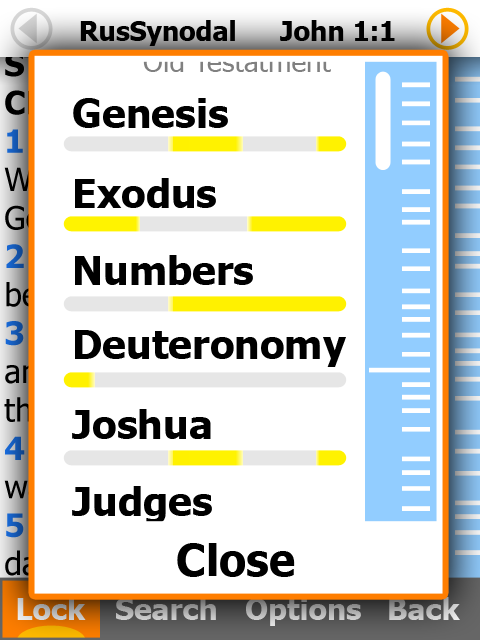
<style>
.page{position:relative;width:480px;height:640px;background:#ffffff}
.page>*{position:absolute;margin:0}
.t1{font:26.8px "Tahoma-Bold";color:#000000}
.t2{font:28px "Tahoma"}
.t3{font:40px "Tahoma-Bold";color:#000000}
.t4{font:44px "Tahoma-Bold";color:#000000}
.t5{font:30px "Tahoma-Bold"}
</style>
<div class="page">
<p class="t1" style="left:80px;top:20px;width:155px;height:26px">RusSynodal</p>
<p class="t1" style="left:280px;top:20px;width:115px;height:21px">John 1:1</p>
<p class="t2" style="left:143px;top:51px;width:188px;height:21px">Old Testatment</p>
<p class="t3" style="left:73px;top:98px;width:155px;height:30px">Genesis</p>
<p class="t3" style="left:75px;top:178px;width:141px;height:30px">Exodus</p>
<p class="t3" style="left:75px;top:255px;width:178px;height:30px">Numbers</p>
<p class="t3" style="left:75px;top:330px;width:271px;height:37px">Deuteronomy</p>
<p class="t3" style="left:72px;top:409px;width:139px;height:30px">Joshua</p>
<p class="t3" style="left:72px;top:486px;width:140px;height:38px">Judges</p>
<p class="t4" style="left:177px;top:543px;width:118px;height:34px">Close</p>
<p class="t5" style="left:17px;top:597px;width:69px;height:23px">Lock</p>
<p class="t5" style="left:116px;top:597px;width:100px;height:23px">Search</p>
<p class="t5" style="left:246px;top:598px;width:115px;height:28px">Options</p>
<p class="t5" style="left:389px;top:597px;width:71px;height:23px">Back</p>
</div>
